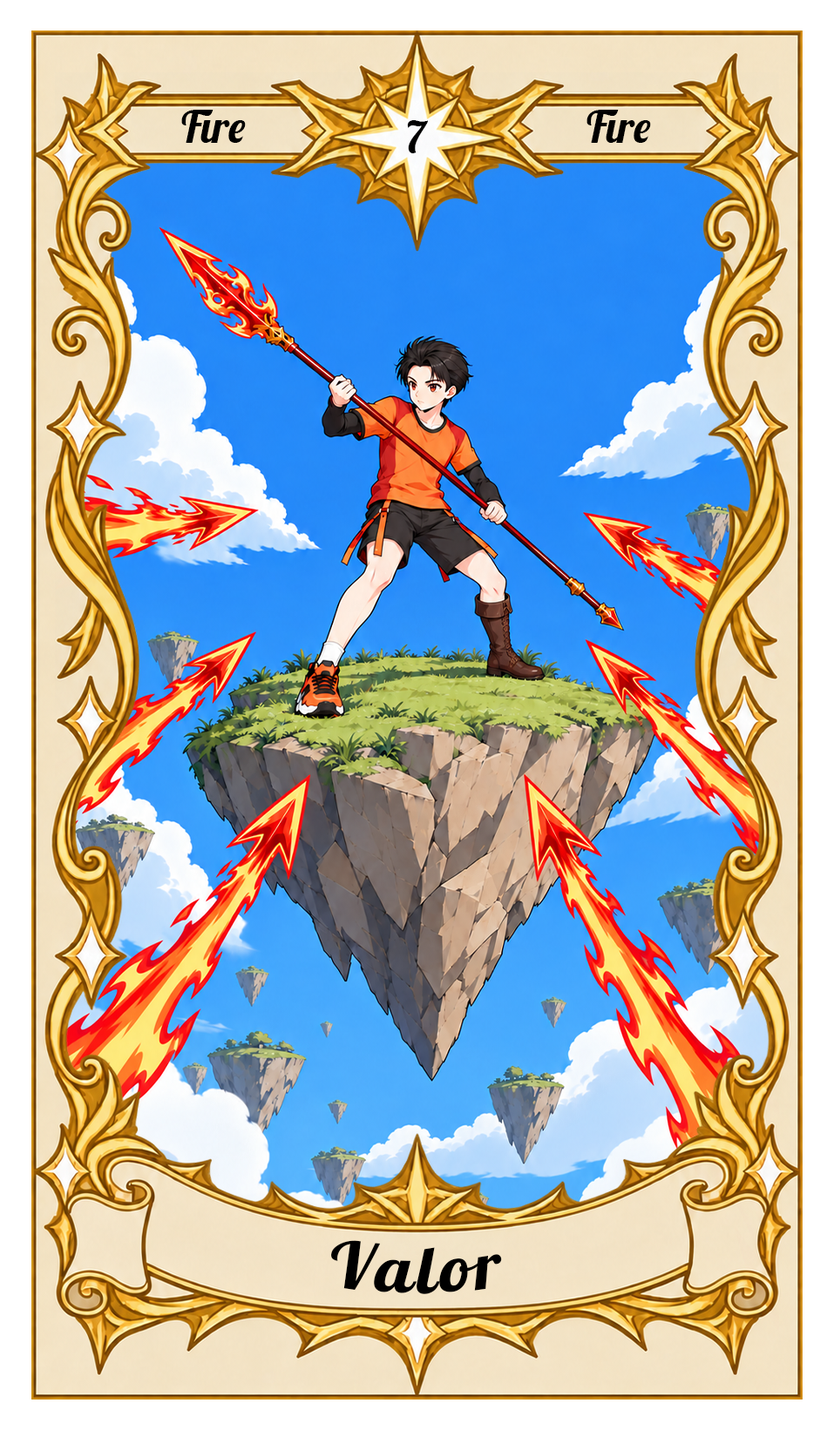
<style>
.page{position:relative;width:834px;height:1430px}
.page>*{position:absolute;margin:0}
.t1{font:43.6px "Lobster-Regular";color:#000000}
.t2{font:65.3px "Lobster-Regular";letter-spacing:0.05em;color:#000000}
</style>
<div class="page">
<p class="t1" style="left:181px;top:110px;width:65px;height:33px">Fire</p>
<p class="t1" style="left:586px;top:110px;width:65px;height:33px">Fire</p>
<p class="t1" style="left:407px;top:120px;width:21px;height:33px">7</p>
<p class="t2" style="left:331px;top:1240px;width:171px;height:54px">Valor</p>
</div>
